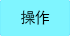
<style>
.page{position:relative;width:70px;height:36px;background:#7ff5ff}
.page>*{position:absolute;margin:0}
.t1{font:15px "STXihei";letter-spacing:-0.045em;color:#000000}
</style>
<div class="page">
<p class="t1" style="left:21px;top:10px;width:29px;height:15px">操作</p>
</div>
